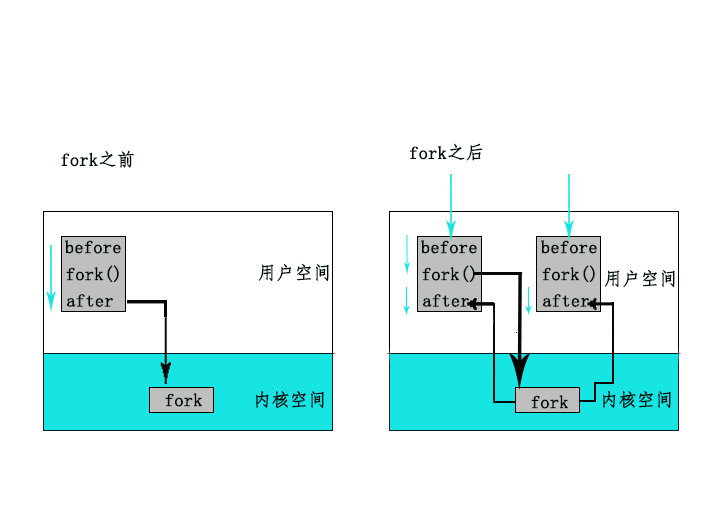
<style>
.page{position:relative;width:709px;height:510px;background:#ffffff}
.page>*{position:absolute;margin:0}
.t1{font:18px "FangSong";color:#010e0e;font-weight:bold}
</style>
<div class="page">
<p class="t1" style="left:61px;top:150px;width:73px;height:18px">fork之前</p>
<p class="t1" style="left:409px;top:143px;width:74px;height:18px">fork之后</p>
<p class="t1" style="left:65px;top:240px;width:56px;height:14px">before</p>
<p class="t1" style="left:421px;top:240px;width:56px;height:14px">before</p>
<p class="t1" style="left:541px;top:240px;width:56px;height:14px">before</p>
<p class="t1" style="left:66px;top:265px;width:53px;height:18px">fork()</p>
<p class="t1" style="left:258px;top:263px;width:71px;height:19px">用户空间</p>
<p class="t1" style="left:422px;top:265px;width:53px;height:18px">fork()</p>
<p class="t1" style="left:542px;top:265px;width:53px;height:18px">fork()</p>
<p class="t1" style="left:604px;top:269px;width:71px;height:19px">用户空间</p>
<p class="t1" style="left:66px;top:294px;width:47px;height:13px">after</p>
<p class="t1" style="left:422px;top:294px;width:47px;height:13px">after</p>
<p class="t1" style="left:542px;top:294px;width:47px;height:13px">after</p>
<p class="t1" style="left:256px;top:390px;width:68px;height:18px">内核空间</p>
<p class="t1" style="left:603px;top:390px;width:68px;height:18px">内核空间</p>
<p class="t1" style="left:165px;top:393px;width:38px;height:14px">fork</p>
<p class="t1" style="left:531px;top:395px;width:38px;height:14px">fork</p>
</div>
